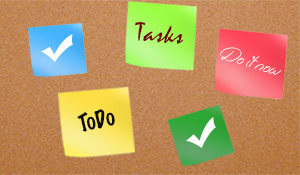
<style>
.page{position:relative;width:300px;height:175px}
.page>*{position:absolute;margin:0}
.t1{font:26.2px "Mistral";color:#760606;scale:1.1 1}
.t2{font:14px "Easy-Rider";color:#faf6f6}
.t3{font:22px "MarkerFelt-Thin";color:#0c0c0c}
</style>
<div class="page">
<p class="t1" style="left:135px;top:22px;width:48px;height:22px;rotate:4deg">Tasks</p>
<p class="t2" style="left:220px;top:47px;width:62px;height:28px;rotate:18deg">Do it now</p>
<p class="t3" style="left:77px;top:109px;width:38px;height:23px;rotate:-12deg">ToDo</p>
</div>
